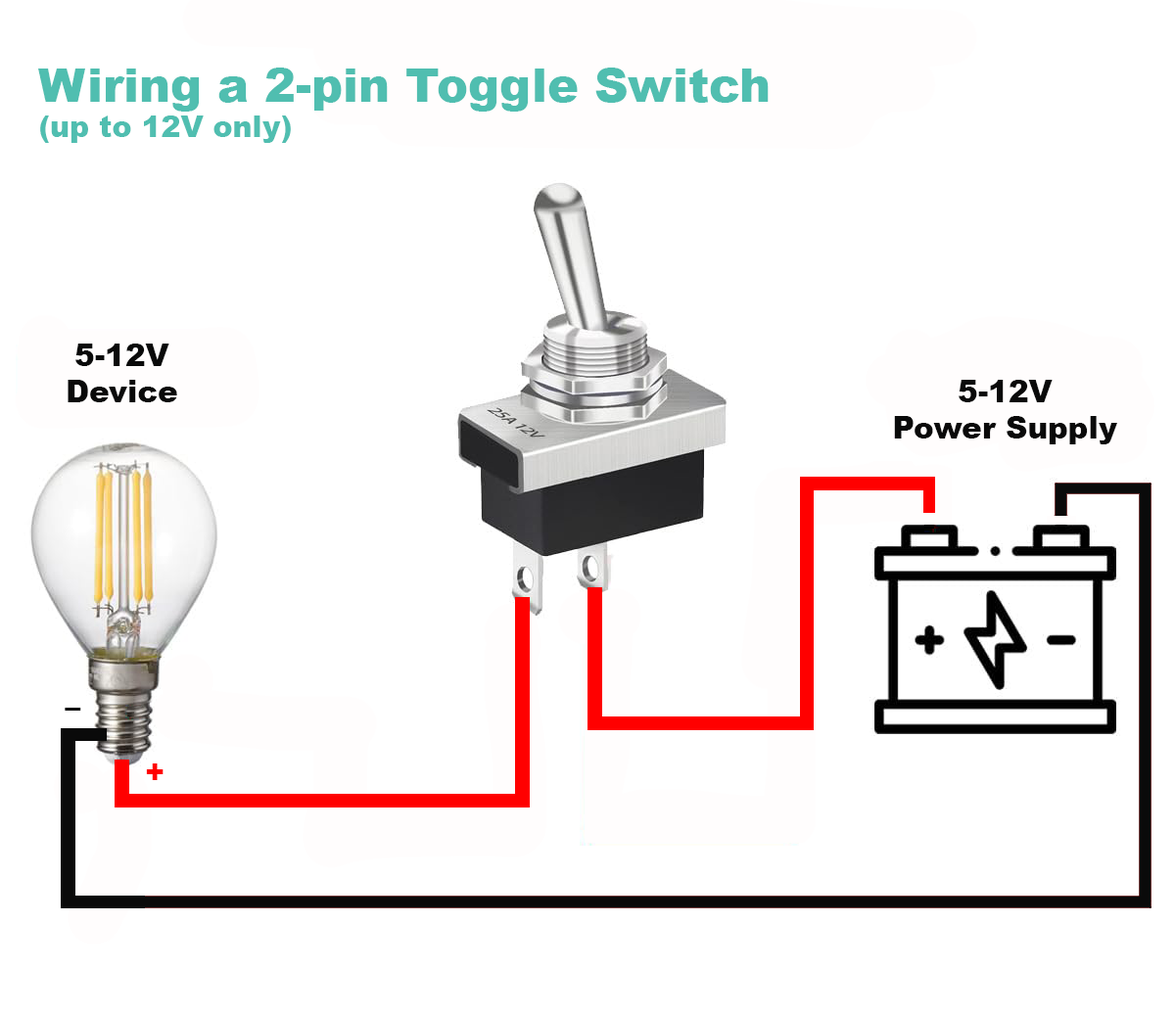
<style>
.page{position:relative;width:1175px;height:1015px;background:#ffffff}
.page>*{position:absolute;margin:0}
.t1{font:47px "Arial-Black";color:#50beb0}
.t2{font:29.4px "Arial-Black";color:#50beb0}
.t3{font:30.3px "Arial-Black";color:#0a0a0a}
.t4{font:30.3px "Arial-Black";color:#ff0000}
</style>
<div class="page">
<p class="t1" style="left:38px;top:68px;width:730px;height:75px">Wiring a 2-pin Toggle Switch<br><span class="t2">(up to 12V only)</span></p>
<p class="t3" style="left:68px;top:344px;width:109px;height:58px;text-align:center">5-12V <br>Device</p>
<p class="t3" style="left:894px;top:380px;width:223px;height:64px;text-align:center">5-12V <br>Power Supply</p>
<p class="t3" style="left:65px;top:708px;width:16px;height:3px">–</p>
<p class="t4" style="left:146px;top:764px;width:17px;height:16px">+</p>
</div>
